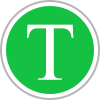
<style>
.page{position:relative;width:100px;height:100px;background:#15c142}
.page>*{position:absolute;margin:0}
.t1{font:83.3px "TimesNewRomanPSMT";letter-spacing:-0.01em;color:#ffffff}
</style>
<div class="page">
<p class="t1" style="left:27px;top:24px;width:47px;height:56px">T</p>
</div>
